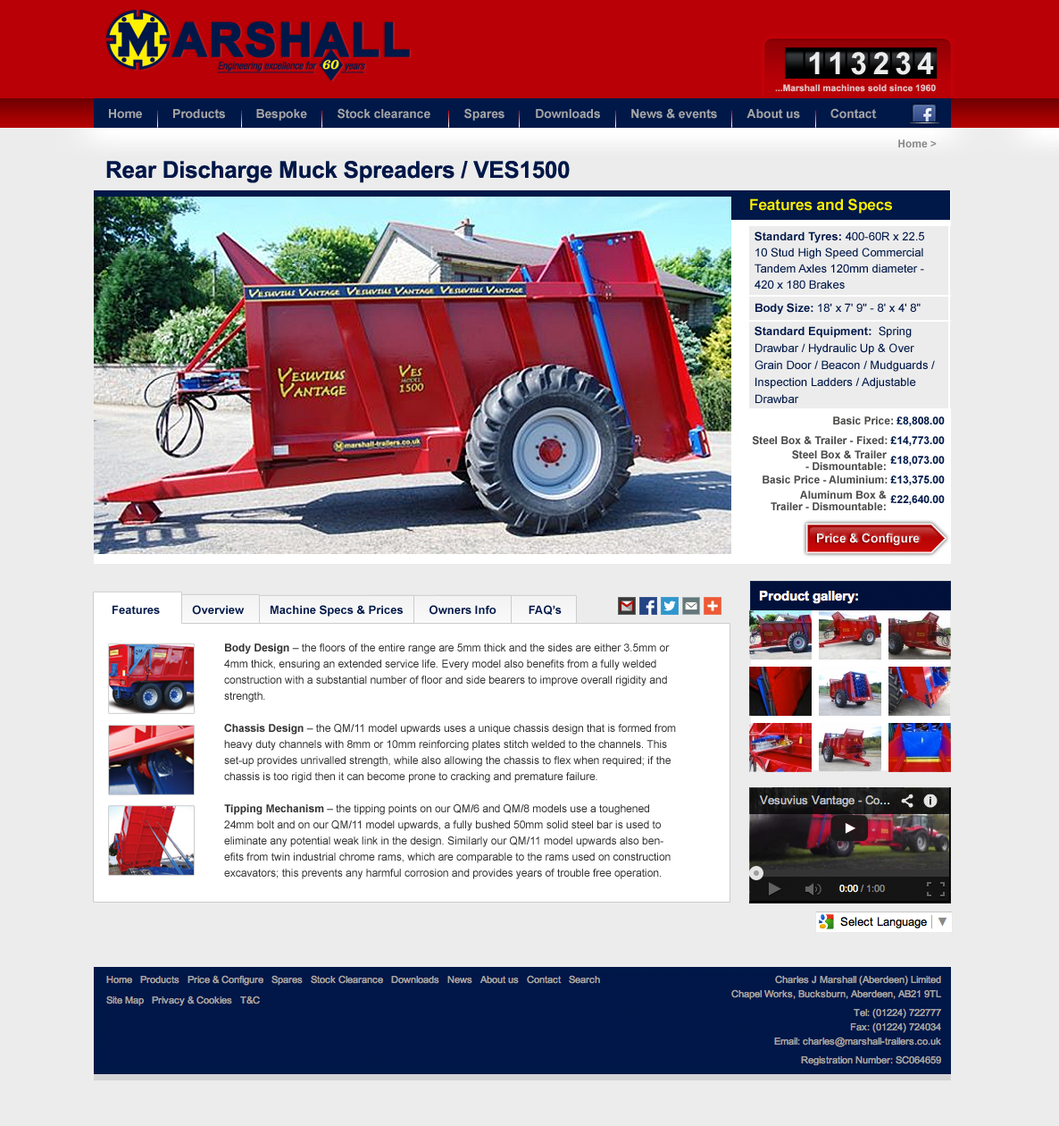
<style>
.page{position:relative;width:1059px;height:1126px;background:#ececec}
.page>*{position:absolute;margin:0}
.t1{font:30.3px "Arial-BoldMT";letter-spacing:0.18em;color:#ececec}
.t2{font:9.2px "Arial-BoldMT";color:#e2bdbe}
.t3{font:12.5px "Arial-BoldMT";letter-spacing:-0.01em;color:#a4a4a4}
.t4{font:10.7px "Arial-BoldMT";color:#87898a}
.t5{font:23.2px "Arial-BoldMT";letter-spacing:-0.01em;color:#001748}
.t6{font:15.2px "Arial-BoldMT";color:#fff000}
.t7{font:11.6px/17px "ArialMT";color:#001748}
.t8{font:11.6px/23.2px "Arial-BoldMT";color:#001748}
.t9{font:11.6px/23.2px "ArialMT";color:#001748}
.t10{font:11.6px/16.1px "ArialMT";color:#001748}
.t11{font:10.7px/19.7px "Arial-BoldMT";color:#4b4b4a}
.t12{font:10.7px/19.7px "Arial-BoldMT";color:#001848}
.t13{font:10.7px/11.6px "Arial-BoldMT";color:#4b4b4a}
.t14{font:11.6px "Arial-BoldMT";color:#001748}
.t15{font:10.7px/16.1px "ArialMT";color:#333333}
.t16{font:10.7px/16.1px "Arial-BoldMT";color:#333333}
</style>
<div class="page">
<p class="t1" style="left:809px;top:52px;width:125px;height:23px">113234</p>
<p class="t2" style="left:775px;top:84px;width:161px;height:8px">...Marshall machines sold since 1960</p>
<p class="t3" style="left:109px;top:108px;width:768px;height:13px">Home         Products         Bespoke         Stock clearance          Spares         Downloads         News &amp; events         About us         Contact</p>
<p class="t4" style="left:899px;top:139px;width:38px;height:8px">Home &gt;</p>
<p class="t5" style="left:106px;top:161px;width:464px;height:22px">Rear Discharge Muck Spreaders / VES1500</p>
<p class="t6" style="left:750px;top:198px;width:142px;height:15px">Features and Specs</p>
<p class="t7" style="left:755px;top:231px;width:180px;height:172px"><span class="t8">Standard Tyres: </span><span class="t9">400-60R x 22.5</span><span class="t10"> 10 Stud High Speed Commercial Tandem Axles 120mm diameter - 420 x 180 Brakes<br></span><span class="t8">Body Size: </span><span class="t9">18' x 7' 9" - 8' x 4' 8"</span><span class="t8"><br>Standard Equipment:  </span>Spring Drawbar / Hydraulic Up &amp; Over Grain Door / Beacon / Mudguards / Inspection Ladders / Adjustable Drawbar</p>
<p class="t11" style="left:752px;top:416px;width:193px;height:89px;text-align:right">Basic Price: <span class="t12">£8,808.00<br></span>  Steel Box &amp; Trailer - Fixed: <span class="t12">£14,773.00<br>   £18,073.00<br></span>  Basic Price - Aluminium: <span class="t12">£13,375.00<br>  £22,640.00</span></p>
<p class="t13" style="left:792px;top:450px;width:95px;height:20px;text-align:right">Steel Box &amp; Trailer<br>- Dismountable:</p>
<p class="t13" style="left:771px;top:490px;width:116px;height:20px;text-align:right">Aluminum Box &amp;<br>Trailer - Dismountable:</p>
<p class="t14" style="left:113px;top:605px;width:449px;height:11px">Features          Overview        Machine Specs &amp; Prices        Owners Info          FAQ’s</p>
<p class="t15" style="left:224px;top:643px;width:452px;height:236px"><span class="t16">Body Design </span>– the floors of the entire range are 5mm thick and the sides are either 3.5mm or 4mm thick, ensuring an extended service life. Every model also benefits from a fully welded construction with a substantial number of floor and side bearers to improve overall rigidity and strength.<br><br><span class="t16">Chassis Design</span> – the QM/11 model upwards uses a unique chassis design that is formed from heavy duty channels with 8mm or 10mm reinforcing plates stitch welded to the channels. This set-up provides unrivalled strength, while also allowing the chassis to flex when required; if the chassis is too rigid then it can become prone to cracking and premature failure.<br><br><span class="t16">Tipping Mechanism</span> – the tipping points on our QM/6 and QM/8 models use a toughened 24mm bolt and on our QM/11 model upwards, a fully bushed 50mm solid steel bar is used to eliminate any potential weak link in the design. Similarly our QM/11 model upwards also benefits from twin industrial chrome rams, which are comparable to the rams used on construction excavators; this prevents any harmful corrosion and provides years of trouble free operation.</p>
</div>
